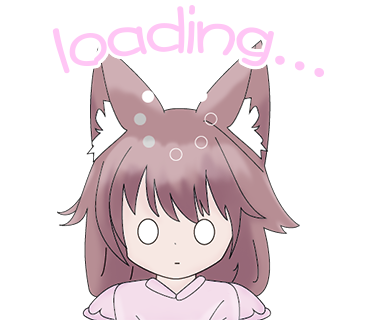
<style>
.page{position:relative;width:370px;height:320px;background:#ffffff}
.page>*{position:absolute;margin:0}
.t1{font:65.2px "ARTianniuB5-Bold";letter-spacing:-0.04em;color:#ffc6f5}
</style>
<div class="page">
<p class="t1" style="left:52px;top:4px;width:272px;height:74px;rotate:1deg">loading...</p>
</div>
